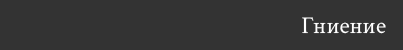
<style>
.page{position:relative;width:403px;height:50px;background:#333333}
.page>*{position:absolute;margin:0}
.t1{font:24px "CrimsonText-Regular";color:#ffffff}
</style>
<div class="page">
<p class="t1" style="left:302px;top:17px;width:84px;height:17px">Гниение</p>
</div>
